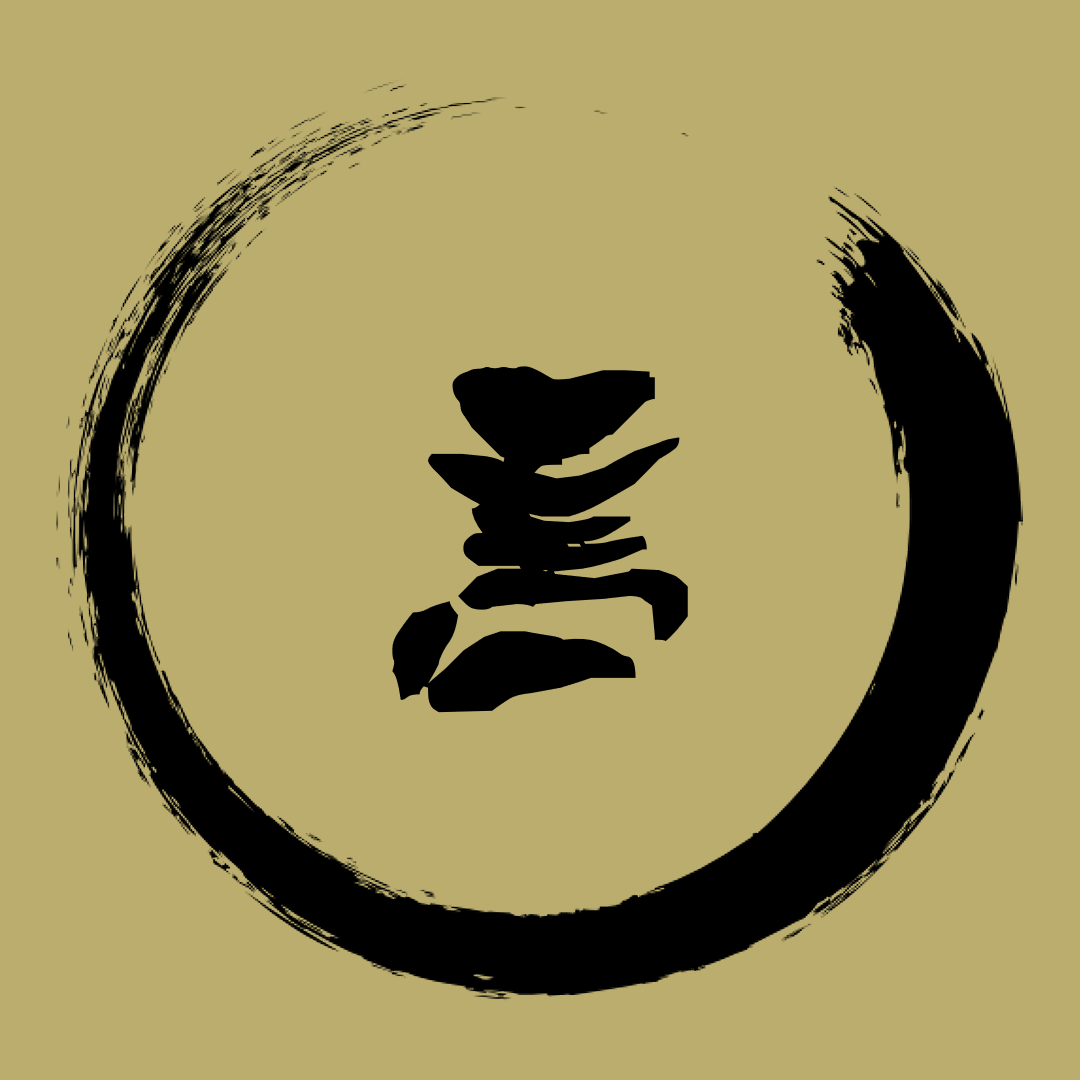
<style>
.page{position:relative;width:1080px;height:1080px;background:#baad6d}
.page>*{position:absolute;margin:0}
.t1{font:350px "ZinHenaBokuryu-RCF";color:#000000}
</style>
<div class="page">
<p class="t1" style="left:392px;top:366px;width:296px;height:347px">言</p>
</div>
